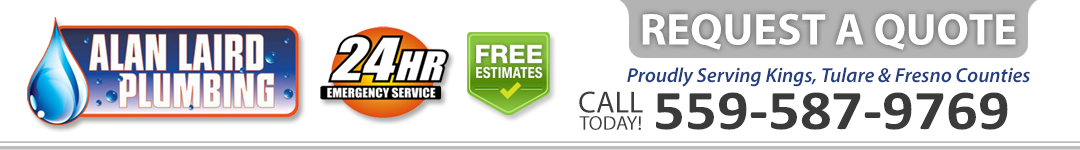
<style>
.page{position:relative;width:1080px;height:150px;background:#ffffff}
.page>*{position:absolute;margin:0}
.t1{font:44.9px "MyriadPro-Bold";color:#ffffff}
.t2{font:20.5px "MyriadPro-SemiboldIt";color:#263f7f}
.t3{font:20.1px/17.2px "MyriadPro-Regular";color:#3d3d3d}
.t4{font:30.6px/17.2px "MyriadPro-Regular";color:#323030}
.t5{font:30.6px/17.2px "MyriadPro-Regular";color:#3d3d3d}
.t6{font:56.8px "Calibri-Bold";color:#3a3a3a;scale:1.11 1}
</style>
<div class="page">
<p class="t1" style="left:642px;top:13px;width:374px;height:37px">REQUEST A QUOTE</p>
<p class="t2" style="left:627px;top:67px;width:403px;height:20px">Proudly Serving Kings, Tulare &amp; Fresno Counties</p>
<p class="t3" style="left:579px;top:91px;width:64px;height:39px;text-align:center"><span class="t4"><br></span><span class="t5">CALL<br></span>TODAY!</p>
<p class="t6" style="left:656px;top:92px;width:352px;height:38px">559-587-9769</p>
</div>
